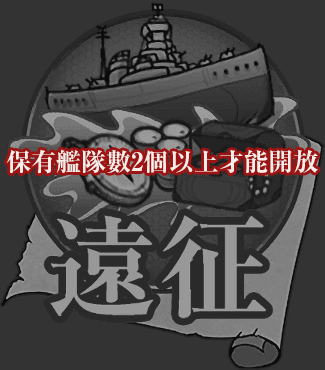
<style>
.page{position:relative;width:325px;height:370px;background:#333333}
.page>*{position:absolute;margin:0}
.t1{font:25px "RyuminPr6N-ExBold";color:#f9eee9}
</style>
<div class="page">
<p class="t1" style="left:6px;top:149px;width:312px;height:25px">保有艦隊數2個以上才能開放</p>
</div>
